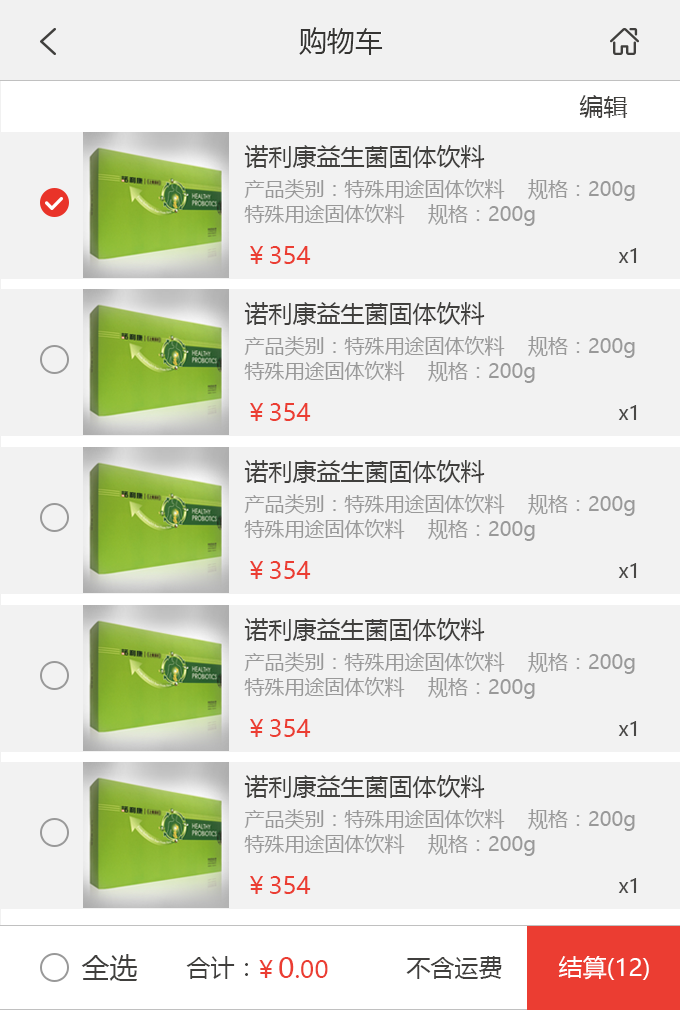
<style>
.page{position:relative;width:680px;height:1010px;background:#f2f2f2}
.page>*{position:absolute;margin:0}
.t1{font:28px "MicrosoftYaHei";color:#363533}
.t2{font:24px "MicrosoftYaHei";color:#403f3d}
.t3{font:20px/25px "MicrosoftYaHei";color:#999999}
.t4{font:24px "MicrosoftYaHei";color:#eb3d32}
.t5{font:20px "MicrosoftYaHei";color:#4a4947}
.t6{font:28px "MicrosoftYaHei";color:#403f3d}
.t7{font:28px "MicrosoftYaHei";color:#eb3d32}
.t8{font:24px "MicrosoftYaHei";color:#ffffff}
</style>
<div class="page">
<p class="t1" style="left:299px;top:27px;width:84px;height:28px">购物车</p>
<p class="t2" style="left:579px;top:95px;width:49px;height:23px">编辑</p>
<p class="t2" style="left:244px;top:145px;width:241px;height:23px">诺利康益生菌固体饮料</p>
<p class="t3" style="left:244px;top:179px;width:391px;height:47px">产品类别：特殊用途固体饮料    规格：200g<br>特殊用途固体饮料    规格：200g</p>
<p class="t4" style="left:250px;top:246px;width:61px;height:18px">￥354</p>
<p class="t5" style="left:618px;top:248px;width:19px;height:15px">x1</p>
<p class="t2" style="left:244px;top:302px;width:241px;height:23px">诺利康益生菌固体饮料</p>
<p class="t3" style="left:244px;top:336px;width:391px;height:47px">产品类别：特殊用途固体饮料    规格：200g<br>特殊用途固体饮料    规格：200g</p>
<p class="t4" style="left:250px;top:403px;width:61px;height:18px">￥354</p>
<p class="t5" style="left:618px;top:405px;width:19px;height:15px">x1</p>
<p class="t2" style="left:244px;top:460px;width:241px;height:23px">诺利康益生菌固体饮料</p>
<p class="t3" style="left:244px;top:494px;width:391px;height:47px">产品类别：特殊用途固体饮料    规格：200g<br>特殊用途固体饮料    规格：200g</p>
<p class="t4" style="left:250px;top:561px;width:61px;height:18px">￥354</p>
<p class="t5" style="left:618px;top:563px;width:19px;height:15px">x1</p>
<p class="t2" style="left:244px;top:618px;width:241px;height:23px">诺利康益生菌固体饮料</p>
<p class="t3" style="left:244px;top:652px;width:391px;height:47px">产品类别：特殊用途固体饮料    规格：200g<br>特殊用途固体饮料    规格：200g</p>
<p class="t4" style="left:250px;top:719px;width:61px;height:18px">￥354</p>
<p class="t5" style="left:618px;top:721px;width:19px;height:15px">x1</p>
<p class="t2" style="left:244px;top:775px;width:241px;height:23px">诺利康益生菌固体饮料</p>
<p class="t3" style="left:244px;top:809px;width:391px;height:47px">产品类别：特殊用途固体饮料    规格：200g<br>特殊用途固体饮料    规格：200g</p>
<p class="t4" style="left:250px;top:876px;width:61px;height:18px">￥354</p>
<p class="t5" style="left:618px;top:878px;width:19px;height:15px">x1</p>
<p class="t6" style="left:81px;top:954px;width:56px;height:27px">全选</p>
<p class="t2" style="left:186px;top:956px;width:62px;height:23px">合计：</p>
<p class="t4" style="left:259px;top:957px;width:69px;height:21px">￥<span class="t7">0</span>.00</p>
<p class="t2" style="left:406px;top:956px;width:96px;height:23px">不含运费</p>
<p class="t8" style="left:558px;top:956px;width:91px;height:24px">结算(12)</p>
</div>
